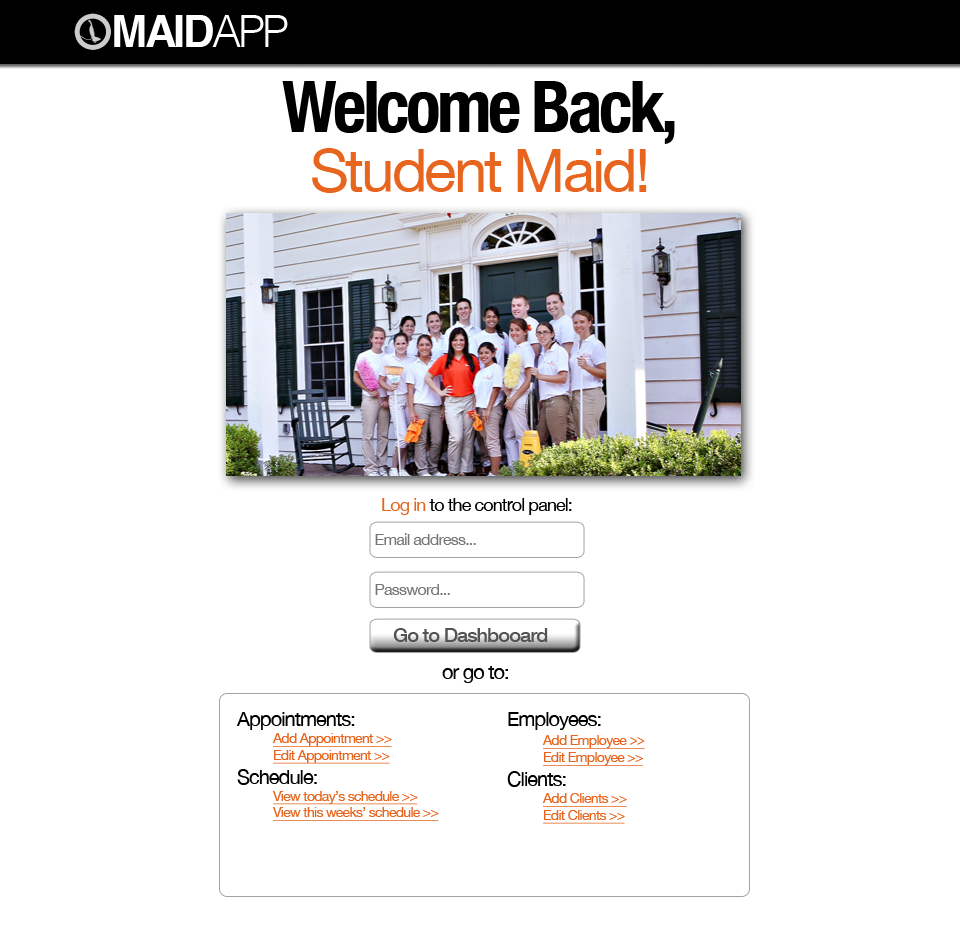
<style>
.page{position:relative;width:960px;height:930px;background:#ffffff}
.page>*{position:absolute;margin:0}
.t1{font:72px/60px "HelveticaNeue-CondensedBold";letter-spacing:-0.05em;color:#000000}
.t2{font:60px/60px "HelveticaNeue";letter-spacing:-0.05em;color:#e7651e}
.t3{font:18px "HelveticaNeue";letter-spacing:-0.05em;color:#000000}
.t4{font:18px "HelveticaNeue";letter-spacing:-0.05em;color:#e7651e}
.t5{font:16px "HelveticaNeue";letter-spacing:-0.05em;color:#757575}
.t6{font:20px "HelveticaNeue-Medium";letter-spacing:-0.05em;color:#535353}
.t7{font:20px "HelveticaNeue";letter-spacing:-0.05em;color:#000000}
.t8{font:14px "HelveticaNeue";letter-spacing:-0.05em;color:#e7651e;text-decoration:underline}
.t9{font:14px "MyriadPro-Regular";letter-spacing:-0.05em;color:#e7651e;text-decoration:underline}
</style>
<div class="page">
<p class="t1" style="left:282px;top:81px;width:393px;height:112px;text-align:center">Welcome Back, <br><span class="t2">Student Maid!</span></p>
<p class="t3" style="left:382px;top:498px;width:190px;height:17px"><span class="t4">Log in </span>to the control panel:</p>
<p class="t5" style="left:375px;top:533px;width:101px;height:12px">Email address...</p>
<p class="t5" style="left:375px;top:584px;width:75px;height:11px">Password...</p>
<p class="t6" style="left:393px;top:628px;width:155px;height:14px">Go to Dashbooard</p>
<p class="t7" style="left:442px;top:666px;width:66px;height:17px">or go to:</p>
<p class="t8" style="left:236px;top:712px;width:203px;height:109px"><span class="t7">Appointments: <br> </span>Add Appointment &gt;&gt;<br> Edit Appointment &gt;&gt;<br><span class="t7">Schedule:<br> </span>View today’s schedule &gt;&gt;<br> View this weeks’ schedule &gt;&gt;</p>
<p class="t8" style="left:507px;top:712px;width:138px;height:112px"><span class="t7">Employees: <br> </span>Add Employee <span class="t9">&gt;&gt;<br> </span>Edit Employee &gt;&gt;<br><span class="t7">Clients:<br> </span>Add Clients &gt;&gt;<br> Edit Clients &gt;&gt;</p>
</div>
